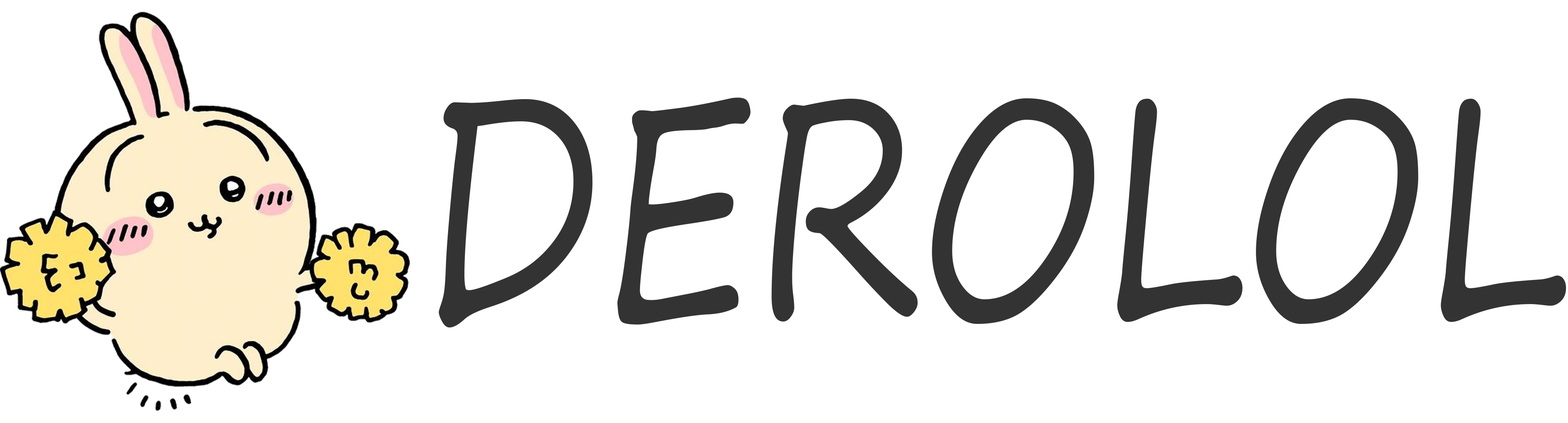
<style>
.page{position:relative;width:1568px;height:423px;background:#ffffff}
.page>*{position:absolute;margin:0}
.t1{font:301.3px "SegoePrint";color:#333333;scale:0.75 1}
</style>
<div class="page">
<p class="t1" style="left:439px;top:98px;width:1127px;height:230px">DEROLOL</p>
</div>
